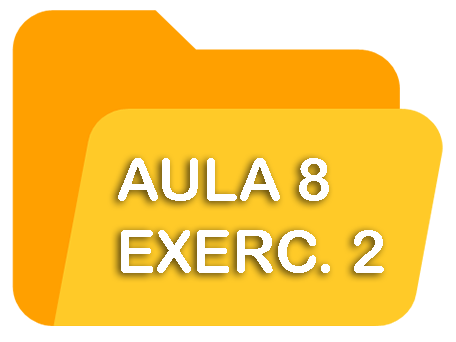
<style>
.page{position:relative;width:456px;height:342px;background:#ffca28}
.page>*{position:absolute;margin:0}
.t1{font:60px "ArialRoundedMTBold";color:#ffffff}
</style>
<div class="page">
<p class="t1" style="left:118px;top:158px;width:266px;height:115px">AULA 8<br>EXERC. 2</p>
</div>
